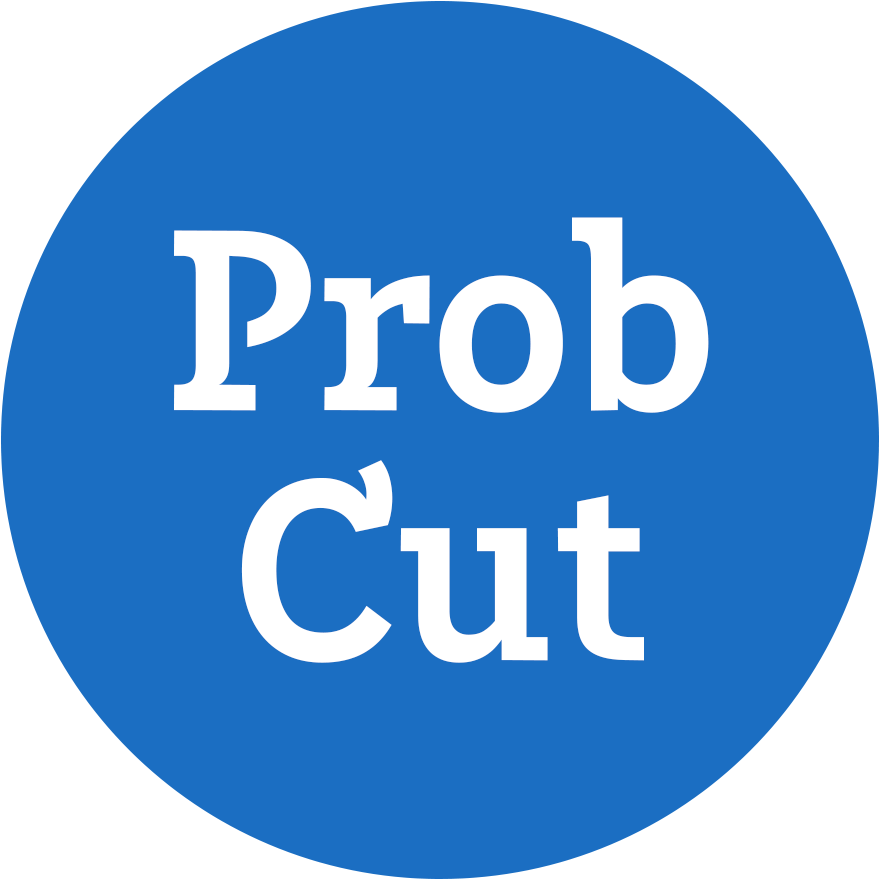
<style>
.page{position:relative;width:880px;height:880px;background:#1b6ec2}
.page>*{position:absolute;margin:0}
.t1{font:260px/250px "LeanOFYW01-Bold";color:#ffffff}
</style>
<div class="page">
<p class="t1" style="left:174px;top:217px;width:535px;height:446px;text-align:center">Prob<br>Cut</p>
</div>
